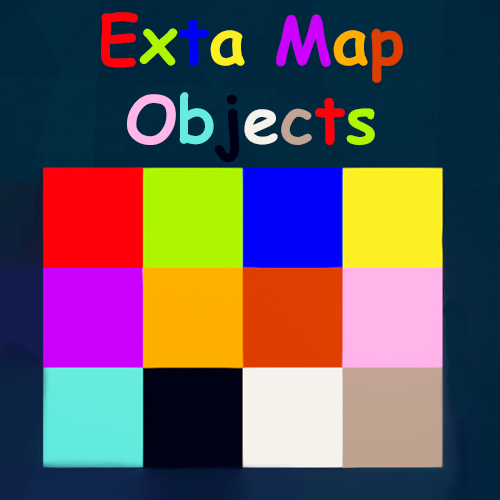
<style>
.page{position:relative;width:500px;height:500px}
.page>*{position:absolute;margin:0}
.t1{font:66px "ComicSansMS-Bold";color:#ff000a}
.t2{font:66px "ComicSansMS-Bold";color:#aff600}
.t3{font:66px "ComicSansMS-Bold";color:#0000fa}
.t4{font:66px "ComicSansMS-Bold";color:#fbef23}
.t5{font:66px "ComicSansMS-Bold";color:#cc00fd}
.t6{font:66px "ComicSansMS-Bold";color:#ffaf00}
.t7{font:66px "ComicSansMS-Bold";color:#de3e00}
.t8{font:66px "ComicSansMS-Bold";color:#ffb6e9}
.t9{font:66px "ComicSansMS-Bold";color:#66ecde}
.t10{font:66px "ComicSansMS-Bold";color:#000116}
.t11{font:66px "ComicSansMS-Bold";color:#f5f1ec}
.t12{font:66px "ComicSansMS-Bold";color:#c1a592}
</style>
<div class="page">
<p class="t1" style="left:101px;top:12px;width:302px;height:151px;text-align:center">E<span class="t2">x</span><span class="t3">t</span><span class="t4">a </span><span class="t5">M</span><span class="t6">a</span><span class="t7">p<br></span><span class="t8">O</span><span class="t9">b</span><span class="t10">j</span><span class="t11">e</span><span class="t12">c</span>t<span class="t2">s</span></p>
</div>
